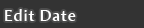
<style>
.page{position:relative;width:144px;height:28px;background:#333333}
.page>*{position:absolute;margin:0}
.t1{font:16px "AmiraParadiso";letter-spacing:0.05em;color:#ffffff}
</style>
<div class="page">
<p class="t1" style="left:5px;top:9px;width:71px;height:12px">Edit Date</p>
</div>
